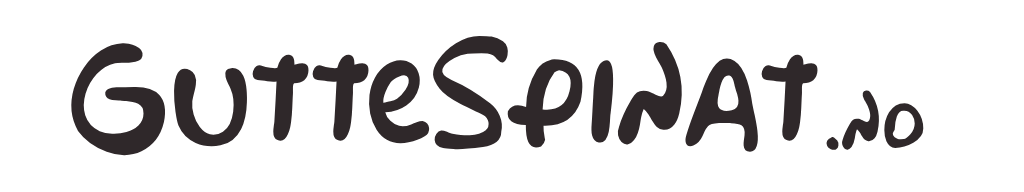
<style>
.page{position:relative;width:1024px;height:192px;background:#ffffff}
.page>*{position:absolute;margin:0}
.t1{font:125.3px "Simpsonfont";color:#2f282a}
.t2{font:72.3px "Simpsonfont";color:#2f282a}
</style>
<div class="page">
<p class="t1" style="left:67px;top:35px;width:751px;height:121px">GutteSpinat</p>
<p class="t2" style="left:826px;top:90px;width:98px;height:60px">.no</p>
</div>
